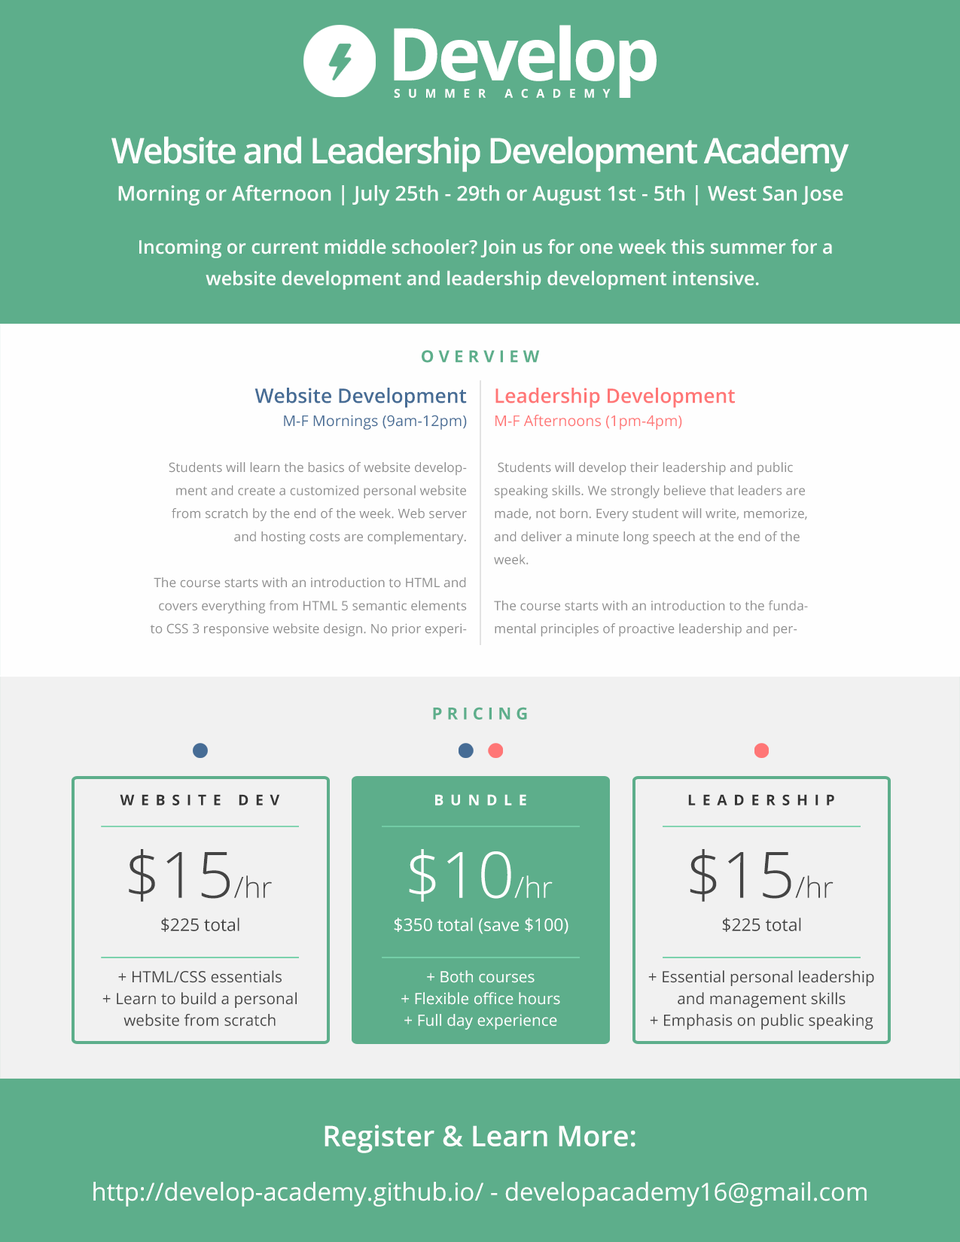
<style>
.page{position:relative;width:960px;height:1242px;background:#5dae8b}
.page>*{position:absolute;margin:0}
.t1{font:72.6px "OpenSans-Bold";letter-spacing:-0.05em;color:#ffffff}
.t2{font:12px "OpenSans-Bold";letter-spacing:0.67em;color:#ffffff}
.t3{font:35.1px "OpenSans-Semibold";letter-spacing:-0.05em;color:#ffffff}
.t4{font:20.4px "OpenSans-Semibold";color:#ffffff}
.t5{font:18.8px/31.4px "OpenSans-Semibold";color:#ffffff}
.t6{font:16.6px "OpenSans-Bold";letter-spacing:0.27em;color:#5dae8b}
.t7{font:13.1px/23px "OpenSans";color:#8d8d8d}
.t8{font:19.9px/23px "OpenSans-Semibold";color:#466c95}
.t9{font:14.9px/23px "OpenSans";color:#466c95}
.t10{font:19.9px/23px "OpenSans-Semibold";color:#ff7676}
.t11{font:14.9px/23px "OpenSans";color:#ff7676}
.t12{font:14.7px "OpenSans-Bold";letter-spacing:0.44em;color:#343434}
.t13{font:14.7px "OpenSans-Bold";letter-spacing:0.44em;color:#ffffff}
.t14{font:64.3px "OpenSans-Light";color:#444444}
.t15{font:29.1px "OpenSans-Light";color:#444444}
.t16{font:64.3px "OpenSans-Light";color:#ffffff}
.t17{font:29.1px "OpenSans-Light";color:#ffffff}
.t18{font:17.3px "OpenSans";color:#444444}
.t19{font:17.3px "OpenSans";color:#ffffff}
.t20{font:15.7px/21.8px "OpenSans";color:#444444}
.t21{font:15.7px/21.8px "OpenSans";color:#ffffff}
.t22{font:28.5px "OpenSans-Semibold";color:#ffffff}
.t23{font:24.7px "OpenSans";color:#ffffff}
</style>
<div class="page">
<p class="t1" style="left:394px;top:25px;width:263px;height:73px">Develop</p>
<p class="t2" style="left:394px;top:89px;width:217px;height:9px">SUMMER ACADEMY</p>
<p class="t3" style="left:111px;top:136px;width:738px;height:36px">Website and Leadership Development Academy</p>
<p class="t4" style="left:118px;top:184px;width:725px;height:22px">Morning or Afternoon | July 25th - 29th or August 1st - 5th | West San Jose</p>
<p class="t5" style="left:139px;top:239px;width:693px;height:51px;text-align:center">Incoming or current middle schooler? Join us for one week this summer for a<br>website development and leadership development intensive.</p>
<p class="t6" style="left:422px;top:350px;width:118px;height:13px">OVERVIEW</p>
<p class="t7" style="left:150px;top:388px;width:317px;height:249px;text-align:right"><span class="t8">Website Development<br></span><span class="t9">M-F Mornings (9am-12pm)<br><br></span> Students will learn the basics of website development and create a customized personal website from scratch by the end of the week. Web server and hosting costs are complementary.<br><br>The course starts with an introduction to HTML and covers everything from HTML 5 semantic elements to CSS 3 responsive website design. No prior experience is necessary.</p>
<p class="t7" style="left:494px;top:388px;width:314px;height:249px"><span class="t10">Leadership Development<br></span><span class="t11">M-F Afternoons (1pm-4pm)<br><br></span> Students will develop their leadership and public speaking skills. We strongly believe that leaders are made, not born. Every student will write, memorize, and deliver a minute long speech at the end of the week.<br><br>The course starts with an introduction to the fundamental principles of proactive leadership and persuasive speaking. Students will also learn personal and time management.</p>
<p class="t6" style="left:433px;top:707px;width:94px;height:13px">PRICING</p>
<p class="t12" style="left:120px;top:794px;width:160px;height:12px">WEBSITE DEV</p>
<p class="t13" style="left:435px;top:794px;width:91px;height:12px">BUNDLE</p>
<p class="t12" style="left:688px;top:794px;width:146px;height:12px">LEADERSHIP</p>
<p class="t14" style="left:129px;top:849px;width:143px;height:53px">$15<span class="t15">/hr</span></p>
<p class="t16" style="left:409px;top:849px;width:144px;height:53px">$10<span class="t17">/hr</span></p>
<p class="t14" style="left:690px;top:849px;width:143px;height:53px">$15<span class="t15">/hr</span></p>
<p class="t18" style="left:161px;top:918px;width:78px;height:14px">$225 total</p>
<p class="t19" style="left:394px;top:918px;width:174px;height:16px">$350 total (save $100)</p>
<p class="t18" style="left:722px;top:918px;width:79px;height:14px">$225 total</p>
<p class="t20" style="left:102px;top:970px;width:195px;height:56px;text-align:center">+ HTML/CSS essentials<br>+ Learn to build a personal<br>website from scratch</p>
<p class="t21" style="left:401px;top:970px;width:159px;height:60px;text-align:center">+ Both courses<br>+ Flexible office hours<br>+ Full day experience</p>
<p class="t20" style="left:648px;top:970px;width:226px;height:60px;text-align:center">+ Essential personal leadership<br>and management skills<br>+ Emphasis on public speaking</p>
<p class="t22" style="left:324px;top:1125px;width:311px;height:28px">Register &amp; Learn More:</p>
<p class="t23" style="left:93px;top:1182px;width:774px;height:25px">http://develop-academy.github.io/ - developacademy16@gmail.com</p>
</div>
